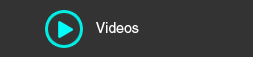
<style>
.page{position:relative;width:253px;height:57px;background:#333333}
.page>*{position:absolute;margin:0}
.t1{font:14px "Helvetica";color:#ffffff}
</style>
<div class="page">
<p class="t1" style="left:96px;top:22px;width:43px;height:11px">Videos</p>
</div>
